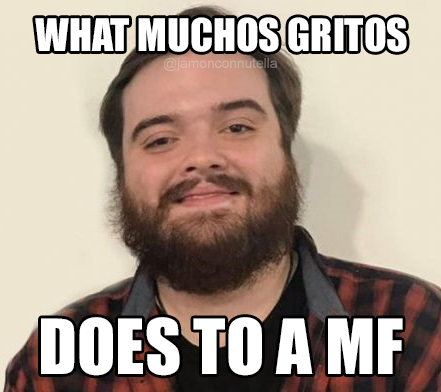
<style>
.page{position:relative;width:441px;height:392px}
.page>*{position:absolute;margin:0}
.t1{font:41.6px "Impact";color:#ffffff}
.t2{font:13.8px "ArialMT";color:#d9b1a4}
.t3{font:70.3px "Impact";color:#ffffff}
</style>
<div class="page">
<p class="t1" style="left:35px;top:17px;width:372px;height:35px">WHAT MUCHOS GRITOS</p>
<p class="t2" style="left:163px;top:58px;width:114px;height:13px">@jamonconnutella</p>
<p class="t3" style="left:41px;top:317px;width:362px;height:59px">DOES TO A MF</p>
</div>
